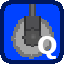
<style>
.page{position:relative;width:64px;height:64px;background:#0042ff}
.page>*{position:absolute;margin:0}
.t1{font:24px "Verdana-Bold";color:#ffffff}
</style>
<div class="page">
<p class="t1" style="left:38px;top:36px;width:19px;height:23px">Q</p>
</div>
